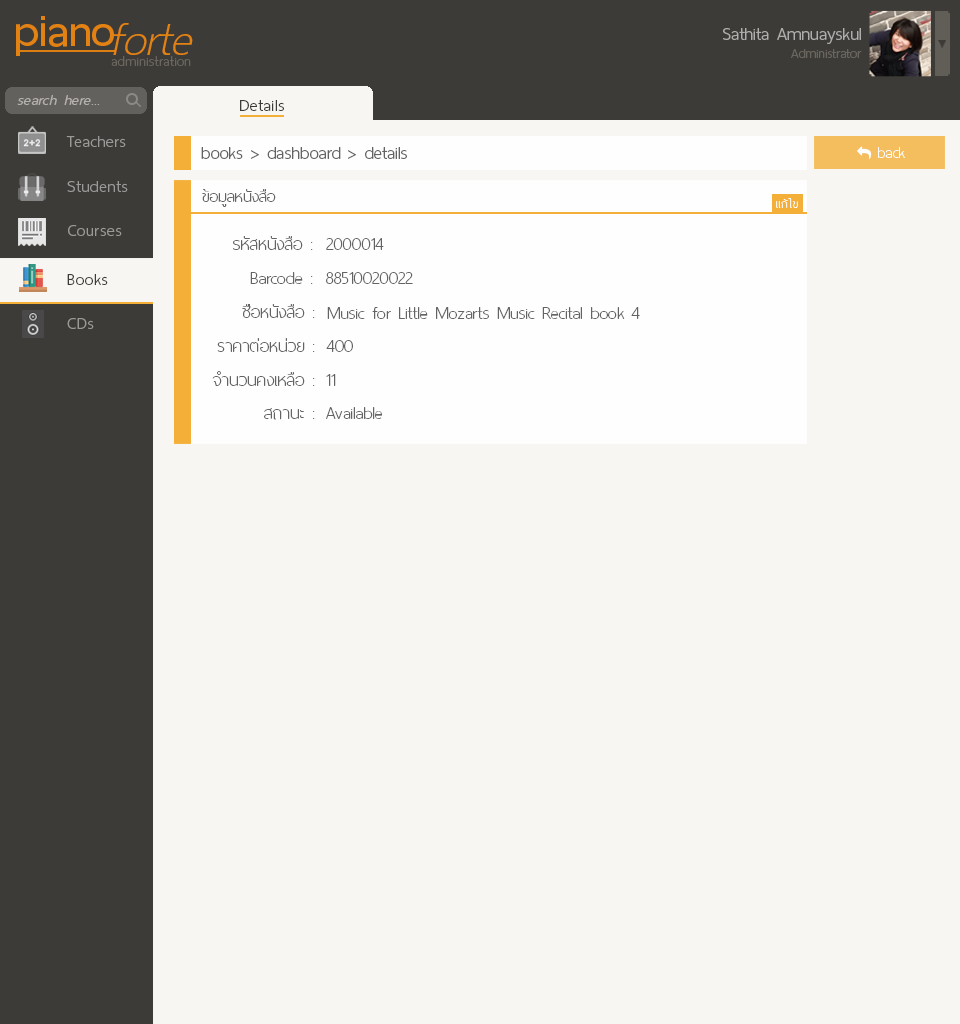
<style>
.page{position:relative;width:960px;height:1024px;background:#f8f6f3}
.page>*{position:absolute;margin:0}
.t1{font:60px "ThaiSansNeue-SemiBold";letter-spacing:-0.005em;color:#e28212}
.t2{font:62px "ThaiSansNeue-ExtraLightItalic";letter-spacing:-0.005em;color:#e28212}
.t3{font:24px "ThaiSansNeue-Light";letter-spacing:-0.005em;color:#afaeac}
.t4{font:18px "ThaiSansNeue-Light";letter-spacing:-0.005em;color:#6a665f}
.t5{font:18.5px "ThaiSansNeue-ExtraLight";letter-spacing:0.025em;color:#6a665f}
.t6{font:20px "ThaiSansNeue-LightItalic";letter-spacing:0.025em;color:#b4b1ae}
.t7{font:22px "ThaiSansNeue-Light";letter-spacing:0.025em;color:#3d3b37}
.t8{font:22px "ThaiSansNeue-Light";letter-spacing:0.025em;color:#9b9a99}
.t9{font:24px "ThaiSansNeue-Light";letter-spacing:-0.005em;color:#636363}
.t10{font:22px "ThaiSansNeue-UltraLight";color:#fefefe}
.t11{font:22px "ThaiSansNeue-UltraLight";color:#636363}
.t12{font:16px "ThaiSansNeue-UltraLight";letter-spacing:0.025em;color:#fefefe}
.t13{font:24px "ThaiSansNeue-UltraLight";color:#636363}
</style>
<div class="page">
<p class="t1" style="left:16px;top:16px;width:98px;height:40px">piano</p>
<p class="t2" style="left:113px;top:23px;width:80px;height:32px">forte</p>
<p class="t3" style="left:723px;top:28px;width:138px;height:16px">Sathita Amnuayskul</p>
<p class="t4" style="left:791px;top:49px;width:71px;height:9px">Administrator</p>
<p class="t5" style="left:111px;top:56px;width:80px;height:10px">administration</p>
<p class="t6" style="left:17px;top:95px;width:83px;height:10px">search here...</p>
<p class="t7" style="left:240px;top:100px;width:44px;height:11px">Details</p>
<p class="t8" style="left:66px;top:136px;width:60px;height:11px">Teachers</p>
<p class="t9" style="left:201px;top:147px;width:206px;height:12px">books &gt; dashboard &gt; details</p>
<p class="t10" style="left:878px;top:147px;width:27px;height:11px">back</p>
<p class="t8" style="left:67px;top:181px;width:61px;height:11px">Students</p>
<p class="t11" style="left:202px;top:189px;width:74px;height:18px">ข้อมูลหนังสือ</p>
<p class="t12" style="left:776px;top:198px;width:22px;height:10px">แก้ไข</p>
<p class="t8" style="left:68px;top:225px;width:54px;height:11px">Courses</p>
<p class="t13" style="left:233px;top:236px;width:80px;height:14px">รหัสหนังสือ :</p>
<p class="t13" style="left:326px;top:238px;width:58px;height:12px">2000014</p>
<p class="t7" style="left:67px;top:274px;width:41px;height:11px">Books</p>
<p class="t13" style="left:250px;top:272px;width:63px;height:12px">Barcode :</p>
<p class="t13" style="left:326px;top:272px;width:87px;height:12px">88510020022</p>
<p class="t13" style="left:242px;top:304px;width:73px;height:14px">ชื่อหนังสือ :</p>
<p class="t8" style="left:67px;top:318px;width:27px;height:11px">CDs</p>
<p class="t13" style="left:327px;top:307px;width:313px;height:12px">Music for Little Mozarts Music Recital book 4</p>
<p class="t13" style="left:217px;top:338px;width:98px;height:14px">ราคาต่อหน่วย :</p>
<p class="t13" style="left:326px;top:340px;width:27px;height:12px">400</p>
<p class="t13" style="left:212px;top:371px;width:103px;height:15px">จำนวนคงเหลือ :</p>
<p class="t13" style="left:326px;top:374px;width:10px;height:12px">11</p>
<p class="t13" style="left:264px;top:408px;width:51px;height:12px">สถานะ :</p>
<p class="t13" style="left:326px;top:407px;width:56px;height:12px">Available</p>
</div>
